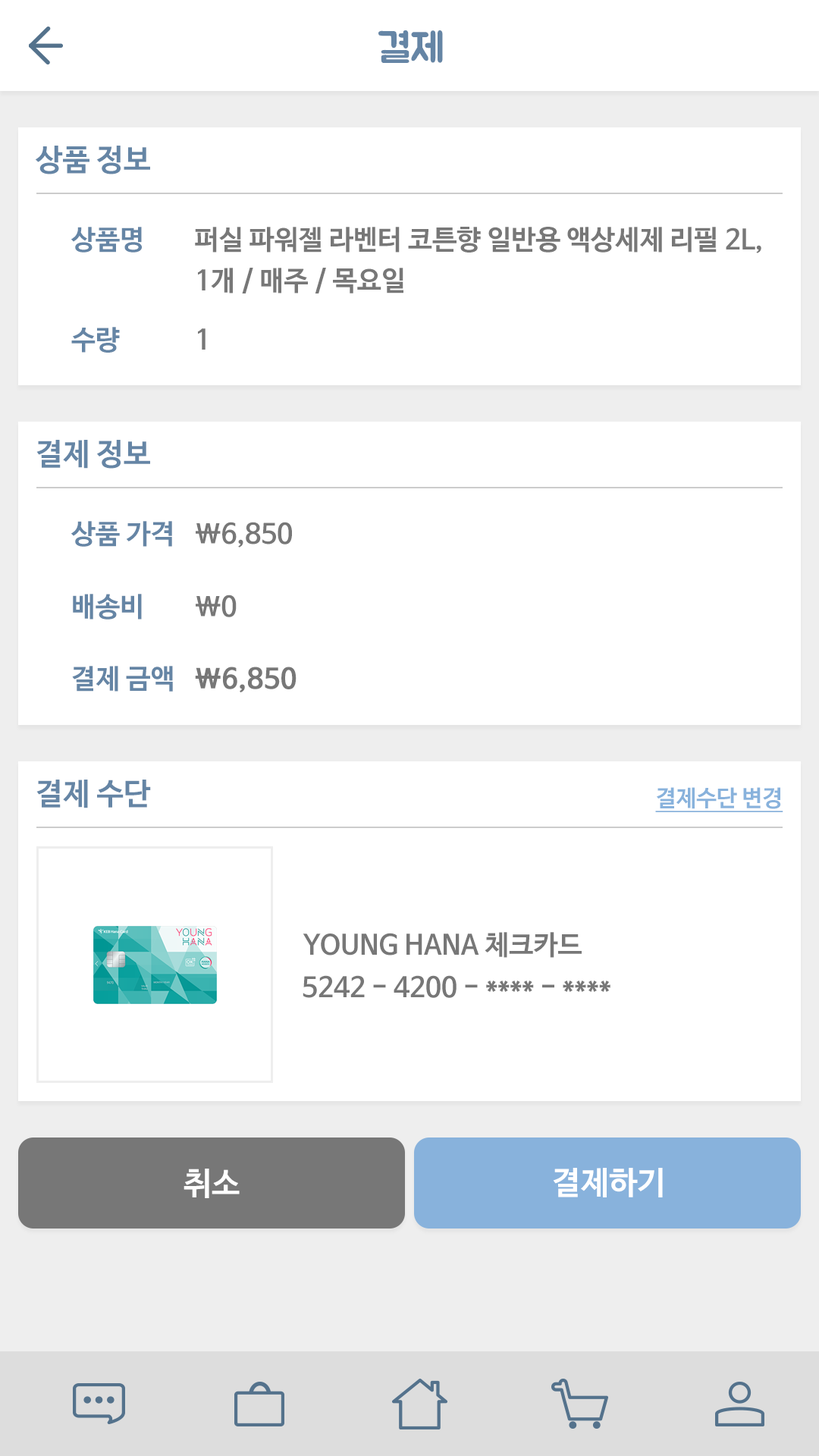
<style>
.page{position:relative;width:819px;height:1456px;background:#ffffff}
.page>*{position:absolute;margin:0}
.t1{font:40.9px "BMJUA";color:#6585a5}
.t2{font:30.3px "NanumBarunGothicBold";color:#6585a5}
.t3{font:27.3px "NanumBarunGothicBold";color:#6585a5}
.t4{font:27.3px/40.9px "NanumBarunGothicBold";color:#777777}
.t5{font:27.3px "NanumBarunGothicBold";color:#777777}
.t6{font:27.3px "NanumBarunGothicBold";color:#777777;font-weight:bold}
.t7{font:22.7px "NanumBarunGothicBold";color:#88b2dc;text-decoration:underline}
.t8{font:31.8px "NanumBarunGothicBold";color:#ffffff}
</style>
<div class="page">
<p class="t1" style="left:378px;top:30px;width:65px;height:33px">결제</p>
<p class="t2" style="left:35px;top:146px;width:115px;height:28px">상품 정보</p>
<p class="t3" style="left:71px;top:227px;width:71px;height:26px">상품명</p>
<p class="t4" style="left:195px;top:227px;width:566px;height:66px">퍼실 파워젤 라벤터 코튼향 일반용 액상세제 리필 2L,<br>1개 / 매주 / 목요일</p>
<p class="t3" style="left:71px;top:327px;width:49px;height:26px">수량</p>
<p class="t5" style="left:198px;top:328px;width:8px;height:22px">1</p>
<p class="t2" style="left:36px;top:440px;width:114px;height:29px">결제 정보</p>
<p class="t3" style="left:71px;top:521px;width:101px;height:26px">상품 가격</p>
<p class="t5" style="left:196px;top:522px;width:96px;height:26px">\6,850</p>
<p class="t3" style="left:73px;top:594px;width:69px;height:26px">배송비</p>
<p class="t5" style="left:196px;top:595px;width:41px;height:22px">\0</p>
<p class="t3" style="left:72px;top:666px;width:101px;height:26px">결제 금액</p>
<p class="t6" style="left:195px;top:667px;width:102px;height:25px">\6,850</p>
<p class="t2" style="left:36px;top:780px;width:115px;height:28px">결제 수단</p>
<p class="t7" style="left:655px;top:787px;width:128px;height:25px">결제수단 변경</p>
<p class="t5" style="left:303px;top:932px;width:279px;height:26px">YOUNG HANA 체크카드</p>
<p class="t5" style="left:303px;top:975px;width:307px;height:23px">5242 - 4200 - **** - ****</p>
<p class="t8" style="left:184px;top:1169px;width:56px;height:29px">취소</p>
<p class="t8" style="left:553px;top:1168px;width:110px;height:29px">결제하기</p>
</div>
